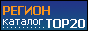
<style>
.page{position:relative;width:88px;height:31px}
.page>*{position:absolute;margin:0}
.t1{font:12px "Tahoma-Bold";color:#f7941d}
.t2{font:11px "Tahoma";color:#ffffff}
</style>
<div class="page">
<p class="t1" style="left:3px;top:6px;width:47px;height:9px">РЕГИОН</p>
<p class="t2" style="left:3px;top:19px;width:40px;height:6px">каталог</p>
</div>
